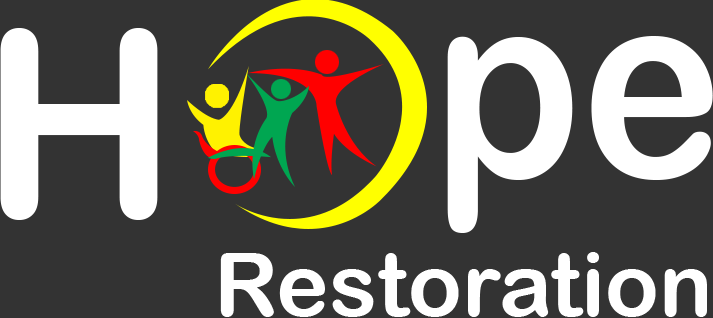
<style>
.page{position:relative;width:713px;height:318px;background:#333333}
.page>*{position:absolute;margin:0}
.t1{font:260px "ArialRoundedMTBold";color:#ffffff}
.t2{font:265px "ArialRoundedMTBold";color:#ffffff;scale:0.9 1}
.t3{font:89px "ArialRoundedMTBold";color:#ffffff}
</style>
<div class="page">
<p class="t1" style="left:0px;top:28px;width:158px;height:192px">H</p>
<p class="t2" style="left:447px;top:36px;width:266px;height:197px">pe</p>
<p class="t3" style="left:220px;top:252px;width:487px;height:65px">Restoration</p>
</div>
